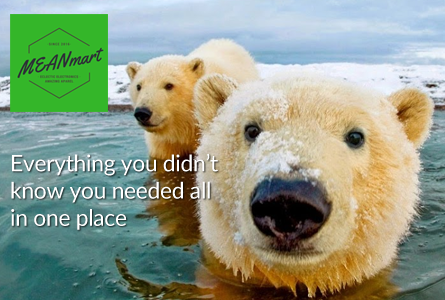
<style>
.page{position:relative;width:445px;height:300px}
.page>*{position:absolute;margin:0}
.t1{font:22.7px "Lato-Regular";letter-spacing:-0.01em;color:#ffffff}
</style>
<div class="page">
<p class="t1" style="left:11px;top:153px;width:207px;height:77px">Everything you didn’t <br>know you needed all<br>in one place</p>
</div>
